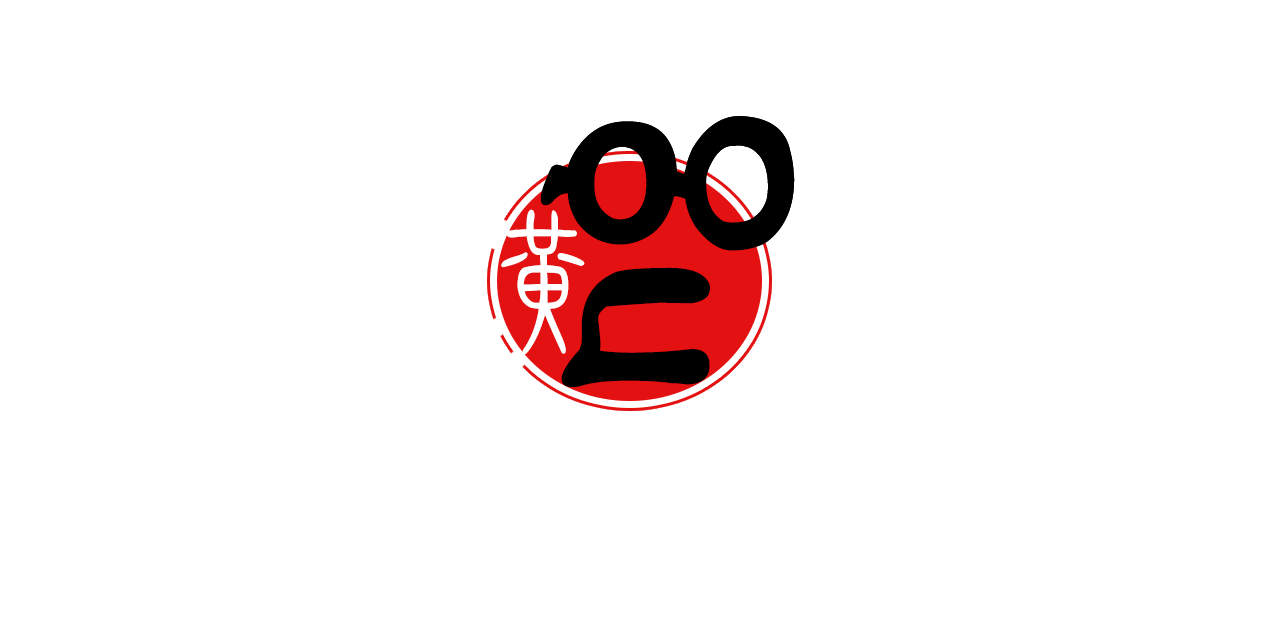
<style>
.page{position:relative;width:1280px;height:640px;background:#ffffff}
.page>*{position:absolute;margin:0}
.t1{font:300.4px "Korean-Calligraphy";color:#000000}
.t2{font:155.7px "FZXZTFW--GB1-0";color:#ffffff}
</style>
<div class="page">
<p class="t1" style="left:540px;top:116px;width:255px;height:272px;rotate:-90deg">Ng</p>
<p class="t2" style="left:501px;top:209px;width:84px;height:146px">黄</p>
</div>
